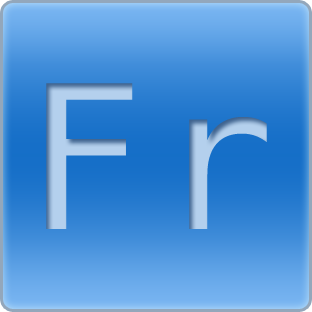
<style>
.page{position:relative;width:312px;height:312px}
.page>*{position:absolute;margin:0}
.t1{font:200px "Menlo-Regular";letter-spacing:0.05em;color:#b4d0ed}
</style>
<div class="page">
<p class="t1" style="left:46px;top:83px;width:221px;height:146px">Fr</p>
</div>
